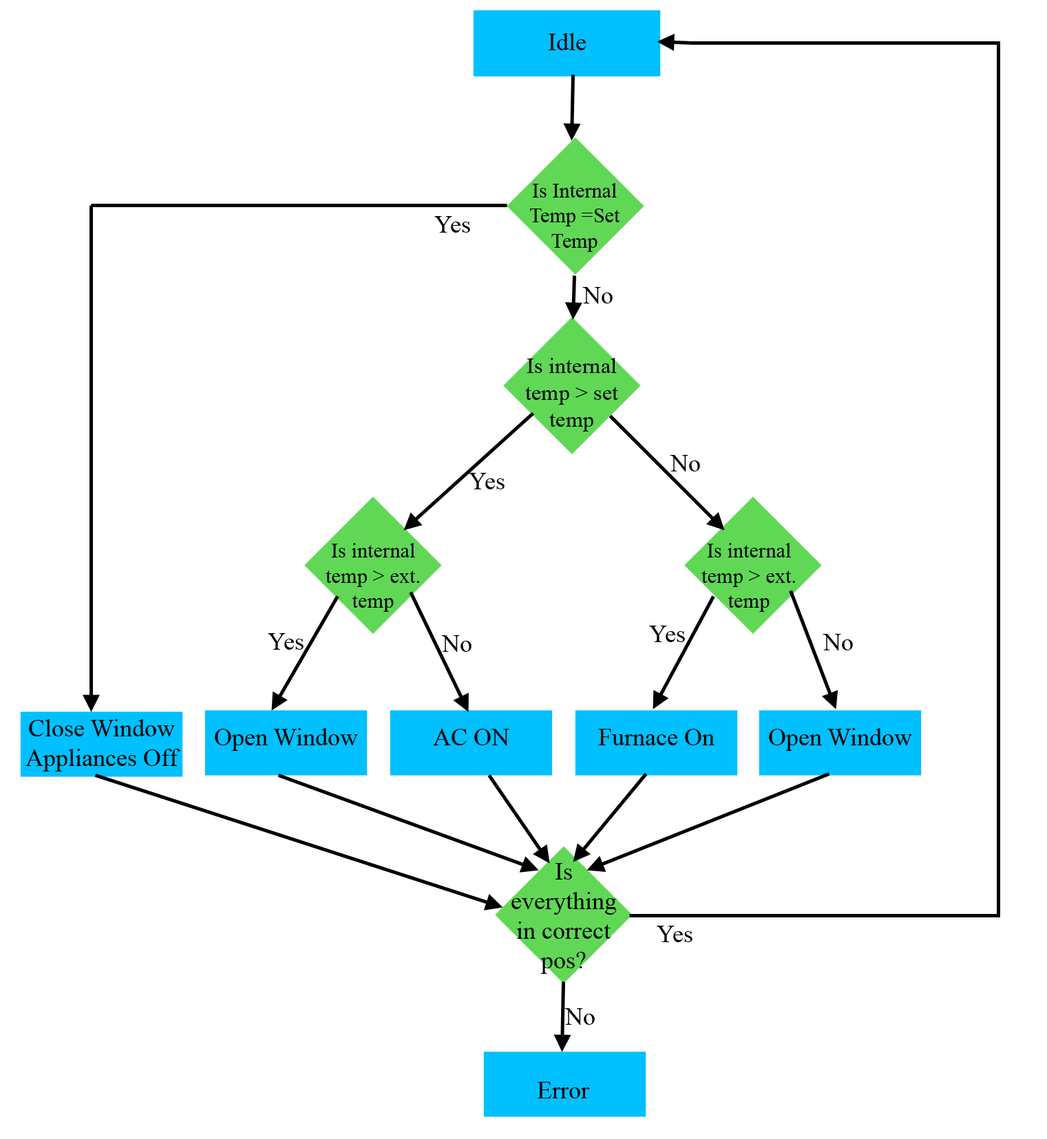
<style>
.page{position:relative;width:1047px;height:1139px;background:#ffffff}
.page>*{position:absolute;margin:0}
.t1{font:24.8px "TimesNewRomanPSMT";color:#000000}
.t2{font:22.3px "TimesNewRomanPSMT";color:#000000}
.t3{font:21px "TimesNewRomanPSMT";color:#000000}
</style>
<div class="page">
<p class="t1" style="left:434px;top:216px;width:36px;height:17px">Yes</p>
<p class="t1" style="left:582px;top:287px;width:31px;height:17px">No</p>
<p class="t2" style="left:525px;top:358px;width:93px;height:74px;text-align:center">Is internal temp &gt; set temp</p>
<p class="t3" style="left:326px;top:543px;width:93px;height:69px;text-align:center">Is internal temp &gt; ext. temp</p>
<p class="t3" style="left:701px;top:543px;width:94px;height:69px;text-align:center">Is internal temp &gt; ext. temp</p>
<p class="t1" style="left:25px;top:719px;width:155px;height:53px;text-align:center">Close Window<br>Appliances Off</p>
<p class="t1" style="left:215px;top:728px;width:143px;height:23px">Open Window</p>
<p class="t1" style="left:433px;top:729px;width:76px;height:17px">AC ON</p>
<p class="t1" style="left:598px;top:729px;width:116px;height:16px">Furnace On</p>
<p class="t1" style="left:769px;top:728px;width:143px;height:23px">Open Window</p>
<p class="t1" style="left:511px;top:863px;width:106px;height:111px;text-align:center">Is <br>everything<br>in correct<br>pos?</p>
<p class="t1" style="left:537px;top:1082px;width:53px;height:16px">Error</p>
</div>
